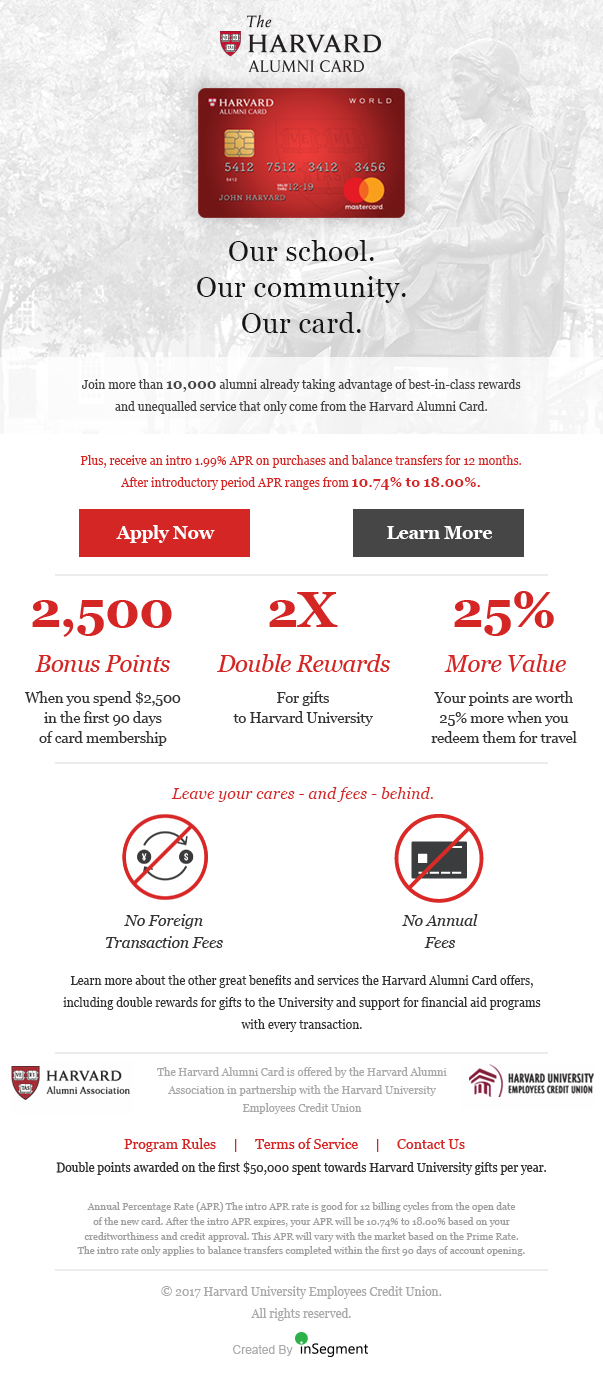
<style>
.page{position:relative;width:603px;height:1376px;background:#ffffff}
.page>*{position:absolute;margin:0}
.t1{font:12px/22px "Georgia";color:#d52626}
.t2{font:14px/22px "Georgia-Bold";color:#d52626}
.t3{font:18px "Georgia-Bold";letter-spacing:-0.02em;color:#ffffff}
.t4{font:50px "Georgia-Bold";letter-spacing:-0.02em;color:#d52626}
.t5{font:24px "Georgia-Italic";letter-spacing:-0.02em;color:#d52626}
.t6{font:15px/20px "Georgia";letter-spacing:-0.02em;color:#333333}
.t7{font:16px "Georgia-Italic";color:#d52626}
.t8{font:16px/22px "Georgia-Italic";letter-spacing:-0.02em;color:#333333}
.t9{font:12px/22px "Georgia";color:#333333}
.t10{font:11px/18px "Georgia";color:#aaaaaa}
.t11{font:14px "Georgia";color:#d52626}
.t12{font:12px "Georgia";color:#333333}
.t13{font:10px/14.7px "Georgia";color:#a1a1a1}
.t14{font:12px/22px "Georgia";color:#aaaaaa}
.t15{font:12px/22px "Georgia";letter-spacing:-0.003em;color:#aaaaaa}
.t16{font:12px/22px "Georgia";letter-spacing:0.003em;color:#aaaaaa}
.t17{font:12px/22px "Georgia";letter-spacing:-0.01em;color:#aaaaaa}
.t18{font:12px/22px "Georgia";letter-spacing:0.025em;color:#aaaaaa}
.t19{font:12px/22px "Georgia";letter-spacing:-0.009em;color:#aaaaaa}
.t20{font:12px "ArialMT";color:#aaaaaa}
</style>
<div class="page">
<p class="t1" style="left:80px;top:455px;width:441px;height:35px;text-align:center">Plus, receive an intro 1.99% APR on purchases and balance transfers for 12 months. After introductory period APR ranges from <span class="t2">10.74% to 18.00%.</span></p>
<p class="t3" style="left:116px;top:525px;width:99px;height:18px">Apply Now</p>
<p class="t3" style="left:387px;top:526px;width:106px;height:13px">Learn More</p>
<p class="t4" style="left:269px;top:592px;width:69px;height:35px">2X</p>
<p class="t4" style="left:454px;top:591px;width:100px;height:45px">25%</p>
<p class="t4" style="left:32px;top:600px;width:140px;height:37px">2,500</p>
<p class="t5" style="left:217px;top:654px;width:173px;height:18px">Double Rewards</p>
<p class="t5" style="left:444px;top:654px;width:122px;height:18px">More Value</p>
<p class="t5" style="left:35px;top:655px;width:135px;height:17px">Bonus Points</p>
<p class="t6" style="left:24px;top:691px;width:157px;height:55px;text-align:center">When you spend $2,500<br>in the first 90 days<br>of card membership</p>
<p class="t6" style="left:233px;top:691px;width:140px;height:35px;text-align:center">For gifts<br>to Harvard University</p>
<p class="t6" style="left:431px;top:691px;width:146px;height:52px;text-align:center">Your points are worth<br>25% more when you<br>redeem them for travel</p>
<p class="t7" style="left:171px;top:787px;width:262px;height:15px">Leave your cares - and fees - behind.</p>
<p class="t8" style="left:106px;top:914px;width:117px;height:34px;text-align:center">No Foreign<br>Transaction Fees</p>
<p class="t8" style="left:402px;top:914px;width:76px;height:34px;text-align:center">No Annual<br>Fees</p>
<p class="t9" style="left:63px;top:975px;width:478px;height:57px;text-align:center">Learn more about the other great benefits and services the Harvard Alumni Card offers,<br>including double rewards for gifts to the University and support for financial aid programs<br>with every transaction.</p>
<p class="t10" style="left:157px;top:1067px;width:290px;height:47px;text-align:center">The Harvard Alumni Card is offered by the Harvard Alumni<br>Association in partnership with the Harvard University<br>Employees Credit Union</p>
<p class="t11" style="left:124px;top:1138px;width:341px;height:14px">Program Rules     |     Terms of Service     |     Contact Us</p>
<p class="t12" style="left:56px;top:1161px;width:490px;height:14px">Double points awarded on the first $50,000 spent towards Harvard University gifts per year.</p>
<p class="t13" style="left:77px;top:1202px;width:448px;height:54px;text-align:center">Annual Percentage Rate (APR) The intro APR rate is good for 12 billing cycles from the open date<br>of the new card. After the intro APR expires, your APR will be 10.74% to 18.00% based on your<br>creditworthiness and credit approval. This APR will vary with the market based on the Prime Rate.<br>The intro rate only applies to balance transfers completed within the first 90 days of account opening.</p>
<p class="t14" style="left:161px;top:1286px;width:281px;height:35px;text-align:center">© 2017 Harvard University Employees Credit Union.<br><span class="t15">A</span>ll <span class="t16">r</span>ig<span class="t15">h</span>ts <span class="t17">r</span>ese<span class="t18">r</span><span class="t19">v</span>e<span class="t19">d</span>.</p>
<p class="t20" style="left:233px;top:1345px;width:60px;height:11px">Created By</p>
</div>
